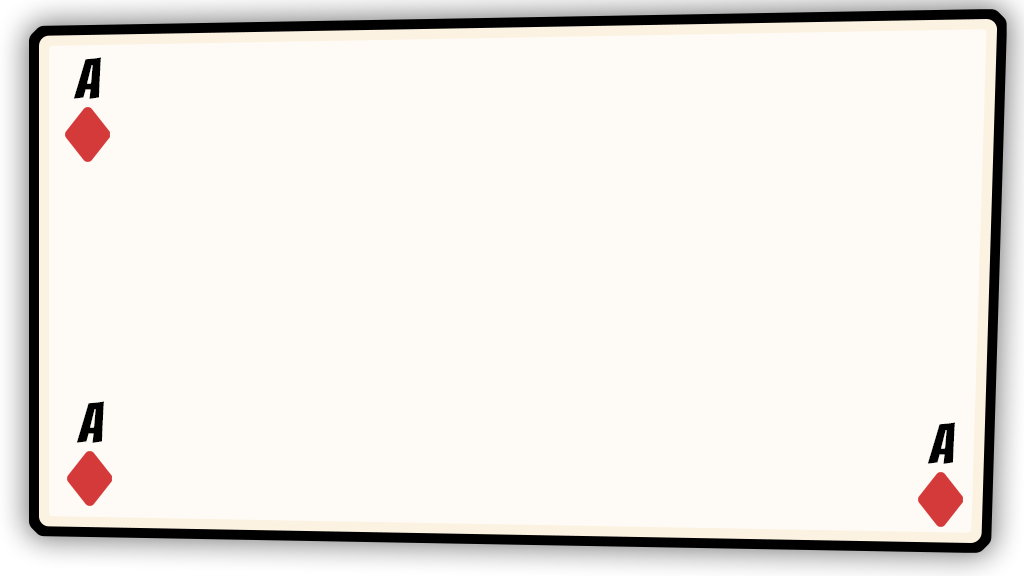
<style>
.page{position:relative;width:1024px;height:576px;background:#fefbf6}
.page>*{position:absolute;margin:0}
.t1{font:56px "Bangers-Regular";color:#000000}
</style>
<div class="page">
<p class="t1" style="left:73px;top:57px;width:28px;height:42px">A</p>
<p class="t1" style="left:76px;top:401px;width:28px;height:42px">A</p>
<p class="t1" style="left:927px;top:422px;width:28px;height:42px">A</p>
</div>
